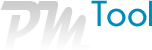
<style>
.page{position:relative;width:152px;height:50px;background:#ffffff}
.page>*{position:absolute;margin:0}
.t1{font:72px "Magneto-Bold";color:#e2e2e2;scale:0.67 1}
.t2{font:36px "Champagne&Limousines-Bold";color:#008cba}
</style>
<div class="page">
<p class="t1" style="left:0px;top:1px;width:91px;height:51px">PM</p>
<p class="t2" style="left:91px;top:0px;width:61px;height:27px">Tool</p>
</div>
